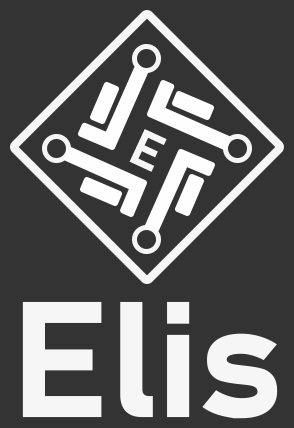
<style>
.page{position:relative;width:294px;height:428px;background:#333333}
.page>*{position:absolute;margin:0}
.t1{font:50.7px "Bahnschrift-Bold";color:#f6f6f6}
.t2{font:162px "Bahnschrift-Bold";color:#f6f6f6}
</style>
<div class="page">
<p class="t1" style="left:129px;top:129px;width:38px;height:43px;rotate:25deg">E</p>
<p class="t2" style="left:22px;top:301px;width:256px;height:118px">Elis</p>
</div>
